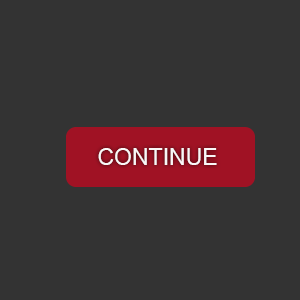
<style>
.page{position:relative;width:300px;height:300px;background:#333333}
.page>*{position:absolute;margin:0}
.t1{font:23px "ArialMT";color:#f8eff1}
</style>
<div class="page">
<p class="t1" style="left:98px;top:148px;width:119px;height:17px">CONTINUE</p>
</div>
